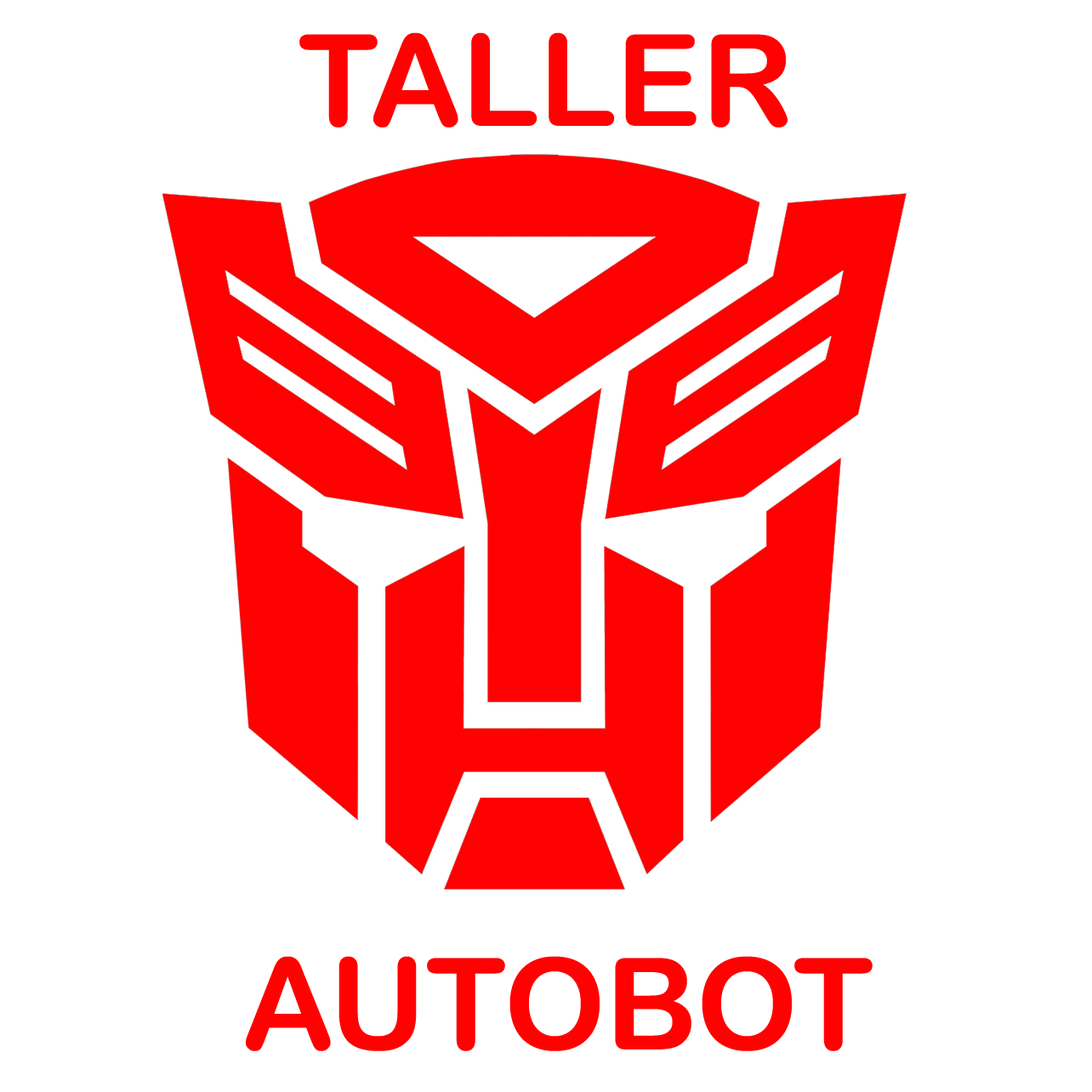
<style>
.page{position:relative;width:1092px;height:1092px;background:#ffffff}
.page>*{position:absolute;margin:0}
.t1{font:127.6px "ArialRoundedMTBold";color:#ff0100}
</style>
<div class="page">
<p class="t1" style="left:299px;top:32px;width:489px;height:96px">TALLER</p>
<p class="t1" style="left:246px;top:956px;width:627px;height:95px">AUTOBOT</p>
</div>
